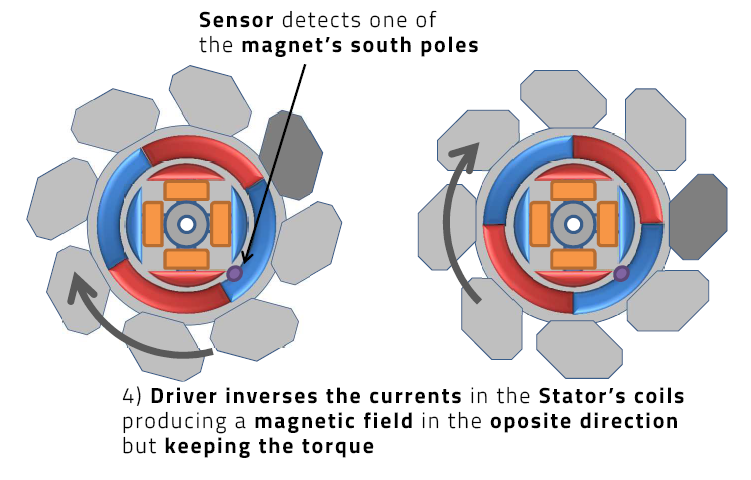
<style>
.page{position:relative;width:751px;height:480px;background:#ffffff}
.page>*{position:absolute;margin:0}
.t1{font:22px/25px "TitilliumWeb-Bold";letter-spacing:0.08em;color:#000000}
.t2{font:22px/25px "TitilliumWeb-Light";letter-spacing:0.08em;color:#000000}
</style>
<div class="page">
<p class="t1" style="left:199px;top:10px;width:279px;height:47px">Sensor <span class="t2">detects one of <br>the </span>magnet’s south poles</p>
<p class="t1" style="left:122px;top:386px;width:562px;height:72px"><span class="t2">4) </span>Driver inverses the currents <span class="t2">in the </span>Stator’s coils<br><span class="t2">producing a </span>magnetic field <span class="t2">in the </span>oposite direction <br><span class="t2">but </span>keeping the torque</p>
</div>
